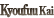
<style>
.page{position:relative;width:54px;height:18px;background:#ffffff}
.page>*{position:absolute;margin:0}
.t1{font:14px "RyuminPro-ExBold";letter-spacing:-0.14em;color:#4a3f32;font-weight:bold;scale:0.8 1}
.t2{font:12px "RyuminPro-ExBold";letter-spacing:-0.14em;color:#4a3f32;font-weight:bold;scale:0.8 1}
</style>
<div class="page">
<p class="t1" style="left:0px;top:4px;width:54px;height:14px">Kyoufuu <span class="t2">Kai</span></p>
</div>
